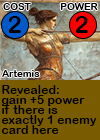
<style>
.page{position:relative;width:100px;height:140px;background:#795b01}
.page>*{position:absolute;margin:0}
.t1{font:9.7px "ArialRoundedMTBold";letter-spacing:0.01em;color:#000000}
.t2{font:24px "ArialRoundedMTBold";letter-spacing:0.01em;color:#000000}
.t3{font:24px "ArialRoundedMTBold";letter-spacing:-0.1em;color:#000000}
.t4{font:12px/10px "ArialRoundedMTBold";letter-spacing:0.01em;color:#000000}
</style>
<div class="page">
<p class="t1" style="left:3px;top:3px;width:28px;height:7px">COST</p>
<p class="t1" style="left:60px;top:3px;width:38px;height:7px">POWER</p>
<p class="t2" style="left:8px;top:16px;width:13px;height:17px">2</p>
<p class="t3" style="left:75px;top:16px;width:13px;height:17px">2</p>
<p class="t1" style="left:2px;top:70px;width:38px;height:7px">Artemis</p>
<p class="t4" style="left:1px;top:85px;width:96px;height:49px">Revealed:<br>gain +5 power<br>if there is <br>exactly 1 enemy<br>card here</p>
</div>
